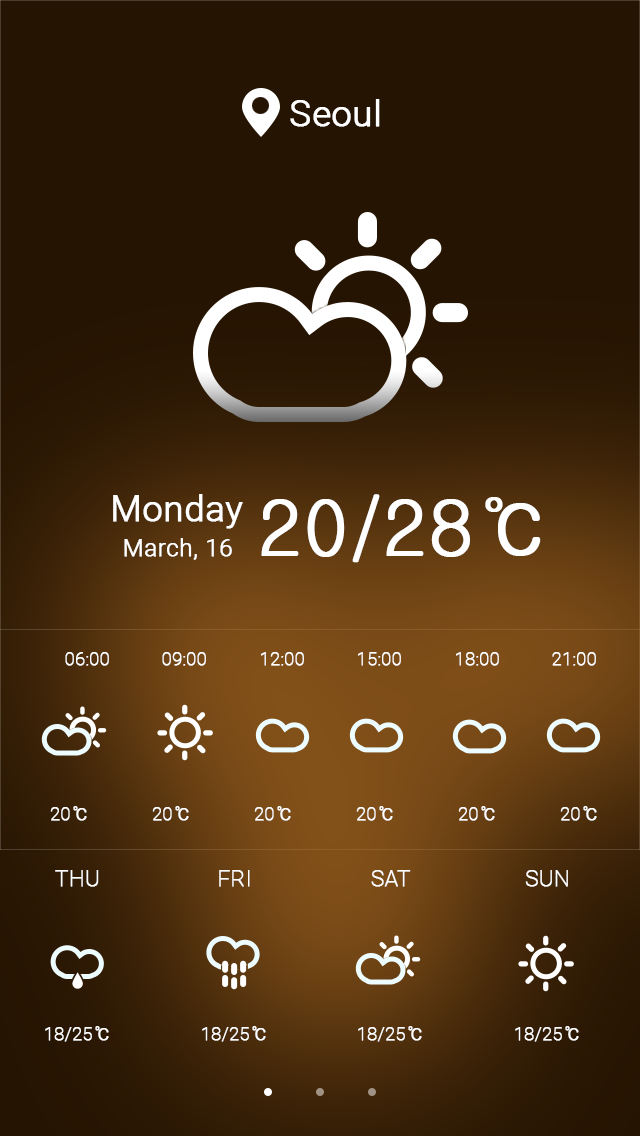
<style>
.page{position:relative;width:640px;height:1136px;background:#251402}
.page>*{position:absolute;margin:0}
.t1{font:36px "Roboto-Light";letter-spacing:0.002em;color:#ffffff;font-weight:bold}
.t2{font:76px "Gulim";letter-spacing:0.002em;color:#ffffff;font-weight:bold}
.t3{font:24px "Roboto-Light";letter-spacing:0.002em;color:#ffffff;font-weight:bold}
.t4{font:18px "Roboto-Thin";letter-spacing:0.002em;color:#ffffff;font-weight:bold}
.t5{font:18px "Gulim";letter-spacing:0.002em;color:#ffffff;font-weight:bold}
.t6{font:22px "Roboto-Thin";letter-spacing:0.002em;color:#ffffff;font-weight:bold}
</style>
<div class="page">
<p class="t1" style="left:290px;top:99px;width:90px;height:28px">Seoul</p>
<p class="t1" style="left:113px;top:494px;width:130px;height:35px">Monday</p>
<p class="t2" style="left:261px;top:494px;width:280px;height:69px">20/28℃</p>
<p class="t3" style="left:124px;top:538px;width:108px;height:22px">March, 16</p>
<p class="t4" style="left:65px;top:652px;width:44px;height:14px">06:00</p>
<p class="t4" style="left:162px;top:652px;width:44px;height:14px">09:00</p>
<p class="t4" style="left:261px;top:652px;width:43px;height:14px">12:00</p>
<p class="t4" style="left:358px;top:652px;width:43px;height:14px">15:00</p>
<p class="t4" style="left:456px;top:652px;width:43px;height:14px">18:00</p>
<p class="t4" style="left:552px;top:652px;width:44px;height:14px">21:00</p>
<p class="t4" style="left:50px;top:806px;width:37px;height:15px">20<span class="t5">℃</span></p>
<p class="t4" style="left:152px;top:806px;width:37px;height:15px">20<span class="t5">℃</span></p>
<p class="t4" style="left:254px;top:806px;width:37px;height:15px">20<span class="t5">℃</span></p>
<p class="t4" style="left:356px;top:806px;width:37px;height:15px">20<span class="t5">℃</span></p>
<p class="t4" style="left:458px;top:806px;width:37px;height:15px">20<span class="t5">℃</span></p>
<p class="t4" style="left:560px;top:806px;width:37px;height:15px">20<span class="t5">℃</span></p>
<p class="t6" style="left:55px;top:870px;width:44px;height:17px">THU</p>
<p class="t6" style="left:219px;top:870px;width:31px;height:17px">FRI</p>
<p class="t6" style="left:371px;top:870px;width:40px;height:17px">SAT</p>
<p class="t6" style="left:525px;top:870px;width:43px;height:17px">SUN</p>
<p class="t4" style="left:45px;top:1026px;width:64px;height:16px">18/25<span class="t5">℃</span></p>
<p class="t4" style="left:202px;top:1026px;width:64px;height:16px">18/25<span class="t5">℃</span></p>
<p class="t4" style="left:358px;top:1026px;width:64px;height:16px">18/25<span class="t5">℃</span></p>
<p class="t4" style="left:515px;top:1026px;width:64px;height:16px">18/25<span class="t5">℃</span></p>
</div>
